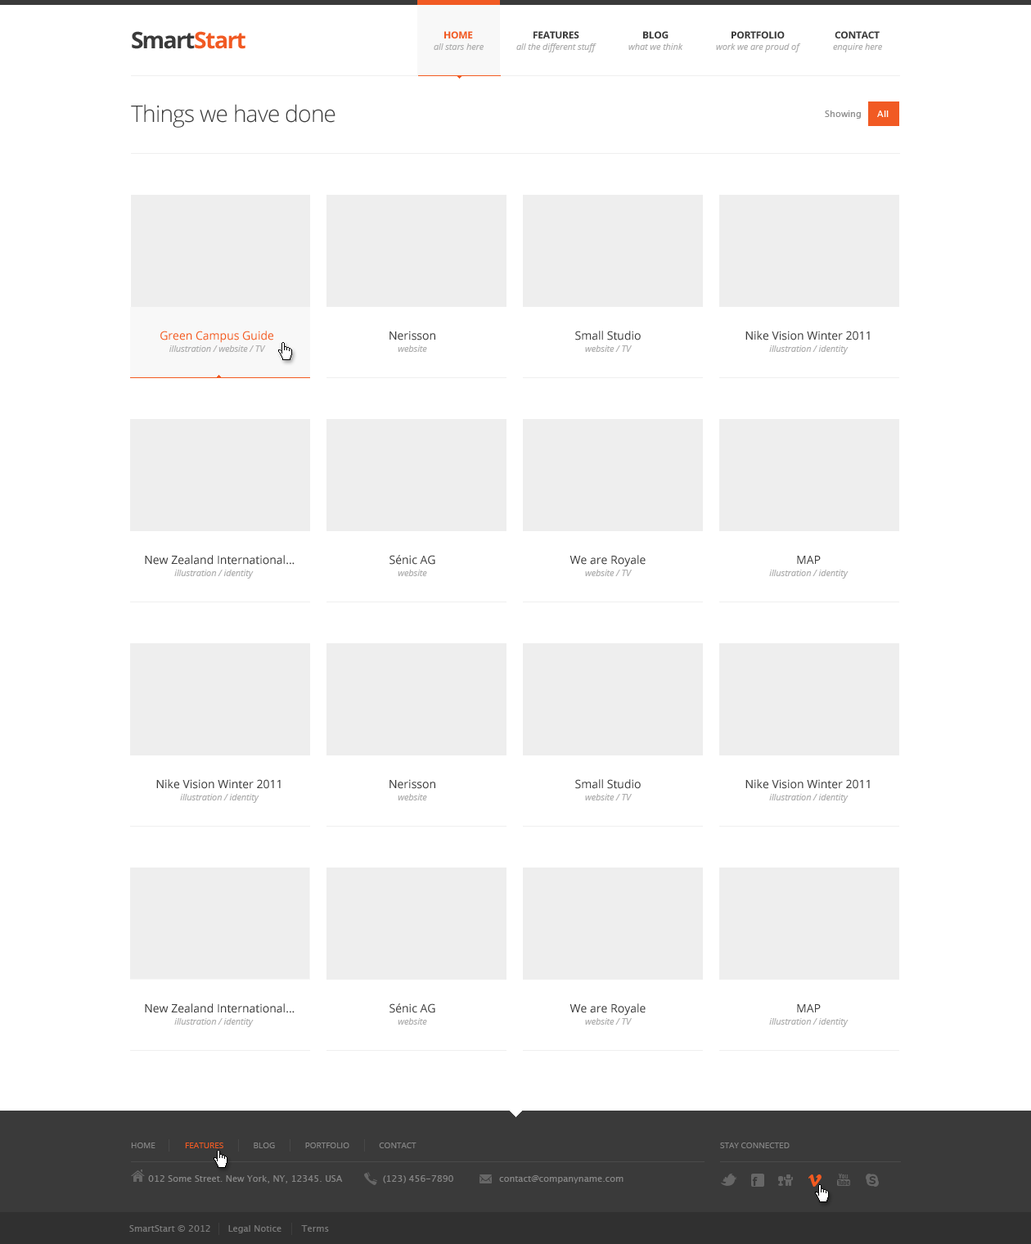
<style>
.page{position:relative;width:1031px;height:1244px;background:#ffffff}
.page>*{position:absolute;margin:0}
.t1{font:22.9px "OpenSans-Bold";letter-spacing:-0.05em;color:#f15a23}
.t2{font:22.9px "OpenSans-Bold";letter-spacing:-0.075em;color:#3a3a3a}
.t3{font:22.9px "OpenSans-Bold";letter-spacing:-0.05em;color:#3a3a3a}
.t4{font:9.8px "OpenSans-Bold";letter-spacing:-0.025em;color:#f15a23;text-transform:uppercase}
.t5{font:9.8px "OpenSans-Bold";letter-spacing:-0.025em;color:#3a3a3a;text-transform:uppercase}
.t6{font:9px "OpenSans-Italic";letter-spacing:-0.01em;color:#aeaeae}
.t7{font:22.9px "OpenSans-Light";letter-spacing:-0.025em;color:#3a3a3a}
.t8{font:9px "LucidaSans";color:#8f8f8f}
.t9{font:9px "LucidaSans";color:#ffffff}
.t10{font:11.5px "OpenSans";color:#f35a20}
.t11{font:11.5px "OpenSans";color:#3a3a3a}
.t12{font:8.2px "OpenSans";color:#868686;text-transform:uppercase}
.t13{font:8.2px "OpenSans";color:#f15a23;text-transform:uppercase}
.t14{font:9px "LucidaSans";color:#868686}
</style>
<div class="page">
<p class="t1" style="left:132px;top:31px;width:113px;height:18px"><span class="t2">S</span><span class="t3">mart</span>Start</p>
<p class="t4" style="left:444px;top:31px;width:29px;height:7px">Home</p>
<p class="t5" style="left:533px;top:31px;width:46px;height:7px">Features</p>
<p class="t5" style="left:643px;top:31px;width:25px;height:7px">Blog</p>
<p class="t5" style="left:731px;top:31px;width:54px;height:7px">Portfolio</p>
<p class="t5" style="left:835px;top:31px;width:45px;height:7px">Contact</p>
<p class="t6" style="left:434px;top:43px;width:50px;height:7px">all stars here</p>
<p class="t6" style="left:516px;top:43px;width:80px;height:9px">all the different stuff</p>
<p class="t6" style="left:628px;top:43px;width:55px;height:7px">what we think</p>
<p class="t6" style="left:716px;top:43px;width:85px;height:9px">work we are proud of</p>
<p class="t6" style="left:833px;top:43px;width:49px;height:9px">enquire here</p>
<p class="t7" style="left:131px;top:104px;width:204px;height:24px">Things we have done</p>
<p class="t8" style="left:825px;top:110px;width:36px;height:9px">Showing</p>
<p class="t9" style="left:877px;top:110px;width:12px;height:7px">All</p>
<p class="t10" style="left:160px;top:331px;width:113px;height:12px">Green Campus Guide</p>
<p class="t11" style="left:389px;top:331px;width:46px;height:9px">Nerisson</p>
<p class="t11" style="left:575px;top:331px;width:66px;height:9px">Small Studio</p>
<p class="t11" style="left:745px;top:331px;width:125px;height:9px">Nike Vision Winter 2011</p>
<p class="t6" style="left:169px;top:345px;width:97px;height:7px">illustration / website / TV</p>
<p class="t6" style="left:398px;top:345px;width:29px;height:7px">website</p>
<p class="t6" style="left:585px;top:345px;width:47px;height:7px">website / TV</p>
<p class="t6" style="left:769px;top:345px;width:79px;height:9px">illustration / identity</p>
<p class="t11" style="left:145px;top:555px;width:150px;height:10px">New Zealand International...</p>
<p class="t11" style="left:389px;top:555px;width:46px;height:10px">Sénic AG</p>
<p class="t11" style="left:569px;top:555px;width:77px;height:12px">We are Royale</p>
<p class="t11" style="left:797px;top:556px;width:24px;height:8px">MAP</p>
<p class="t6" style="left:174px;top:569px;width:80px;height:9px">illustration / identity</p>
<p class="t6" style="left:398px;top:569px;width:29px;height:7px">website</p>
<p class="t6" style="left:585px;top:569px;width:47px;height:7px">website / TV</p>
<p class="t6" style="left:769px;top:569px;width:79px;height:9px">illustration / identity</p>
<p class="t11" style="left:156px;top:779px;width:125px;height:10px">Nike Vision Winter 2011</p>
<p class="t11" style="left:389px;top:779px;width:46px;height:10px">Nerisson</p>
<p class="t11" style="left:575px;top:779px;width:66px;height:10px">Small Studio</p>
<p class="t11" style="left:745px;top:779px;width:125px;height:10px">Nike Vision Winter 2011</p>
<p class="t6" style="left:180px;top:794px;width:79px;height:9px">illustration / identity</p>
<p class="t6" style="left:398px;top:794px;width:29px;height:6px">website</p>
<p class="t6" style="left:585px;top:794px;width:47px;height:6px">website / TV</p>
<p class="t6" style="left:769px;top:794px;width:79px;height:9px">illustration / identity</p>
<p class="t11" style="left:145px;top:1003px;width:150px;height:10px">New Zealand International...</p>
<p class="t11" style="left:389px;top:1003px;width:46px;height:10px">Sénic AG</p>
<p class="t11" style="left:569px;top:1003px;width:77px;height:12px">We are Royale</p>
<p class="t11" style="left:797px;top:1004px;width:24px;height:8px">MAP</p>
<p class="t6" style="left:174px;top:1018px;width:80px;height:9px">illustration / identity</p>
<p class="t6" style="left:398px;top:1018px;width:29px;height:6px">website</p>
<p class="t6" style="left:585px;top:1018px;width:47px;height:6px">website / TV</p>
<p class="t6" style="left:769px;top:1018px;width:79px;height:9px">illustration / identity</p>
<p class="t12" style="left:131px;top:1142px;width:285px;height:6px">Home              <span class="t13">Features</span>              Blog              Portfolio              Contact</p>
<p class="t12" style="left:720px;top:1142px;width:70px;height:6px">Stay connected</p>
<p class="t14" style="left:148px;top:1175px;width:195px;height:8px">012 Some Street. New York, NY, 12345. USA</p>
<p class="t14" style="left:383px;top:1175px;width:70px;height:8px">(123) 456-7890</p>
<p class="t14" style="left:499px;top:1175px;width:124px;height:8px">contact@companyname.com</p>
<p class="t14" style="left:129px;top:1225px;width:200px;height:8px;opacity:0.85">SmartStart © 2012      Legal Notice       Terms</p>
</div>
